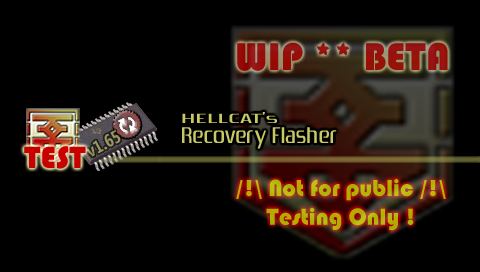
<style>
.page{position:relative;width:480px;height:272px;background:#000000}
.page>*{position:absolute;margin:0}
.t1{font:40px "Bauhaus93";color:#97110c}
.t2{font:14px "Zrnic";color:#c8c864;scale:2 1}
.t3{font:18px "SegoeCondensed-Bold";color:#99975e}
.t4{font:24px "Zrnic";color:#c8c864}
.t5{font:32px "Bauhaus93";color:#c80000}
.t6{font:24px "Bauhaus93";color:#b8b106}
</style>
<div class="page">
<p class="t1" style="left:237px;top:42px;width:211px;height:29px">WIP ** BETA</p>
<p class="t2" style="left:182px;top:112px;width:95px;height:11px">HELLCAT’s</p>
<p class="t3" style="left:86px;top:130px;width:35px;height:27px;rotate:-29deg">v1.65</p>
<p class="t4" style="left:182px;top:127px;width:155px;height:22px">Recovery Flasher</p>
<p class="t5" style="left:24px;top:146px;width:62px;height:23px">TEST</p>
<p class="t6" style="left:236px;top:179px;width:210px;height:52px;text-align:center">/!\ Not for public /!\<br>Testing Only !</p>
</div>
